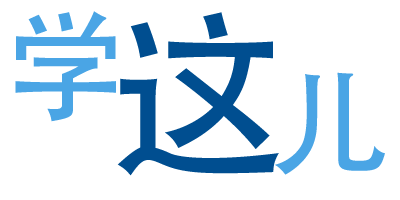
<style>
.page{position:relative;width:400px;height:200px;background:#ffffff}
.page>*{position:absolute;margin:0}
.t1{font:120px "AdobeHeitiStd-Regular";letter-spacing:-0.1em;color:#4aa5e5}
.t2{font:180px "AdobeHeitiStd-Regular";letter-spacing:-0.1em;color:#004e90}
</style>
<div class="page">
<p class="t1" style="left:15px;top:11px;width:101px;height:111px">学</p>
<p class="t2" style="left:117px;top:12px;width:268px;height:164px">这<span class="t1">儿</span></p>
</div>
